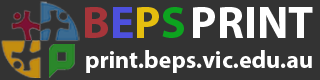
<style>
.page{position:relative;width:320px;height:80px;background:#333333}
.page>*{position:absolute;margin:0}
.t1{font:45.8px "MyriadPro-Bold";color:#a6353a}
.t2{font:45.8px "MyriadPro-Bold";color:#4d50dd}
.t3{font:45.8px "MyriadPro-Bold";color:#e5be0f}
.t4{font:45.8px "MyriadPro-Bold";color:#0da31f}
.t5{font:45.8px "MyriadPro-Bold";color:#ffffff}
.t6{font:24.2px "MyriadPro-Bold";color:#ffffff}
</style>
<div class="page">
<p class="t1" style="left:85px;top:7px;width:99px;height:31px">B<span class="t2">E</span><span class="t3">P</span><span class="t4">S</span></p>
<p class="t5" style="left:193px;top:7px;width:120px;height:31px">PRINT</p>
<p class="t6" style="left:86px;top:50px;width:226px;height:23px">print.beps.vic.edu.au</p>
</div>
